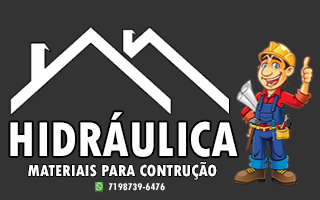
<style>
.page{position:relative;width:320px;height:200px;background:#333333}
.page>*{position:absolute;margin:0}
.t1{font:51.5px "TwCenMT-CondensedExtraBold";color:#ffffff;scale:0.97 1}
.t2{font:16.8px "TwCenMT-CondensedExtraBold";color:#ffffff}
.t3{font:10.3px "TwCenMT-CondensedExtraBold";color:#fefefe;scale:0.97 1}
</style>
<div class="page">
<p class="t1" style="left:10px;top:112px;width:228px;height:45px">HIDRÁULICA</p>
<p class="t2" style="left:28px;top:162px;width:189px;height:18px">MATERIAIS PARA CONTRUÇÃO</p>
<p class="t3" style="left:108px;top:183px;width:57px;height:8px">7198739-6476</p>
</div>
